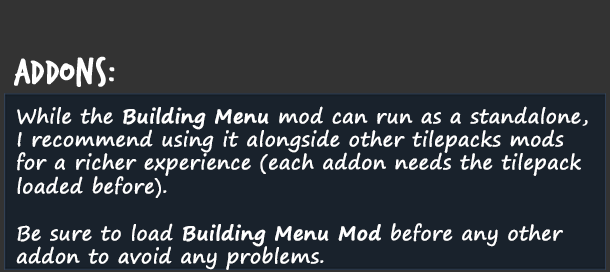
<style>
.page{position:relative;width:610px;height:272px;background:#19222c}
.page>*{position:absolute;margin:0}
.t1{font:39px "TrashHand";color:#ffffff;font-weight:bold}
.t2{font:19.5px "SegoePrint";color:#ffffff;font-weight:bold}
.t3{font:19.5px "SegoePrint-Bold";color:#ffffff;font-weight:bold}
</style>
<div class="page">
<p class="t1" style="left:14px;top:56px;width:101px;height:31px">Addons:</p>
<p class="t2" style="left:16px;top:106px;width:572px;height:164px;text-align:justify">While the <span class="t3">Building Menu</span> mod can run as a standalone, <br>I recommend using it alongside other tilepacks mods <br>for a richer experience (each addon needs the tilepack <br>loaded before).<br><br>Be sure to load <span class="t3">Building Menu Mod</span> before any other <br>addon to avoid any problems.</p>
</div>
